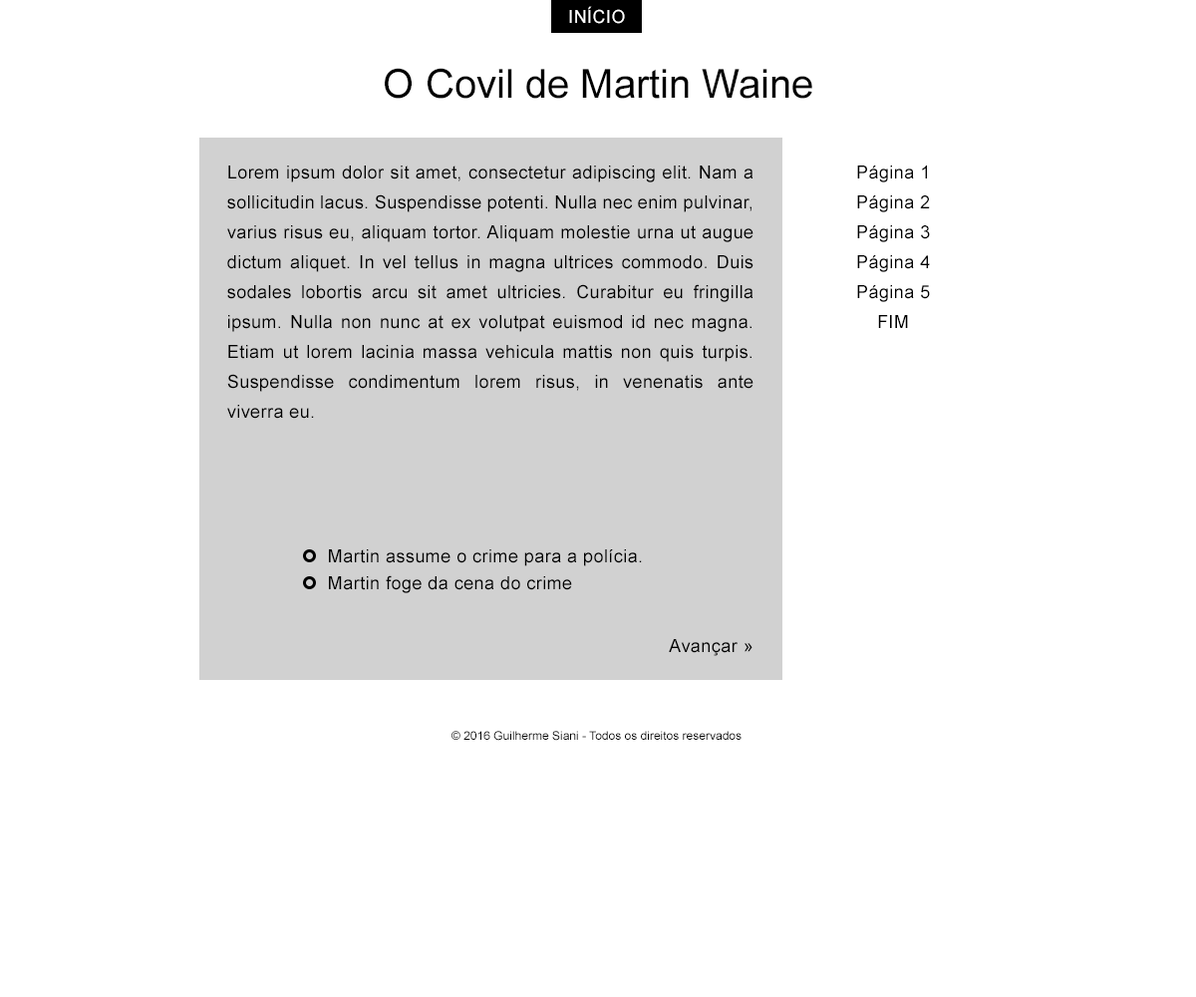
<style>
.page{position:relative;width:1196px;height:997px;background:#ffffff}
.page>*{position:absolute;margin:0}
.t1{font:17.9px "ArialMT";letter-spacing:0.025em;color:#ffffff;text-transform:uppercase}
.t2{font:39.9px "ArialMT";color:#000000}
.t3{font:17.9px/29.9px "ArialMT";letter-spacing:0.025em;color:#000000}
.t4{font:17.9px "ArialMT";letter-spacing:0.025em;color:#000000}
.t5{font:11.7px "ArialMT";color:#000000}
</style>
<div class="page">
<p class="t1" style="left:569px;top:6px;width:56px;height:18px">início</p>
<p class="t2" style="left:385px;top:68px;width:427px;height:31px">O Covil de Martin Waine</p>
<p class="t3" style="left:227px;top:165px;width:527px;height:254px;text-align:justify">Lorem ipsum dolor sit amet, consectetur adipiscing elit. Nam a sollicitudin lacus. Suspendisse potenti. Nulla nec enim pulvinar, varius risus eu, aliquam tortor. Aliquam molestie urna ut augue dictum aliquet. In vel tellus in magna ultrices commodo. Duis sodales lobortis arcu sit amet ultricies. Curabitur eu fringilla ipsum. Nulla non nunc at ex volutpat euismod id nec magna. Etiam ut lorem lacinia massa vehicula mattis non quis turpis. Suspendisse condimentum lorem risus, in venenatis ante viverra eu.</p>
<p class="t3" style="left:857px;top:165px;width:73px;height:163px;text-align:center">Página 1<br>Página 2<br>Página 3<br>Página 4<br>Página 5<br>FIM</p>
<p class="t4" style="left:329px;top:549px;width:313px;height:17px">Martin assume o crime para a polícia.</p>
<p class="t4" style="left:329px;top:575px;width:243px;height:18px">Martin foge da cena do crime</p>
<p class="t4" style="left:669px;top:639px;width:84px;height:17px">Avançar »</p>
<p class="t5" style="left:452px;top:731px;width:290px;height:10px">© 2016 Guilherme Siani - Todos os direitos reservados</p>
</div>
